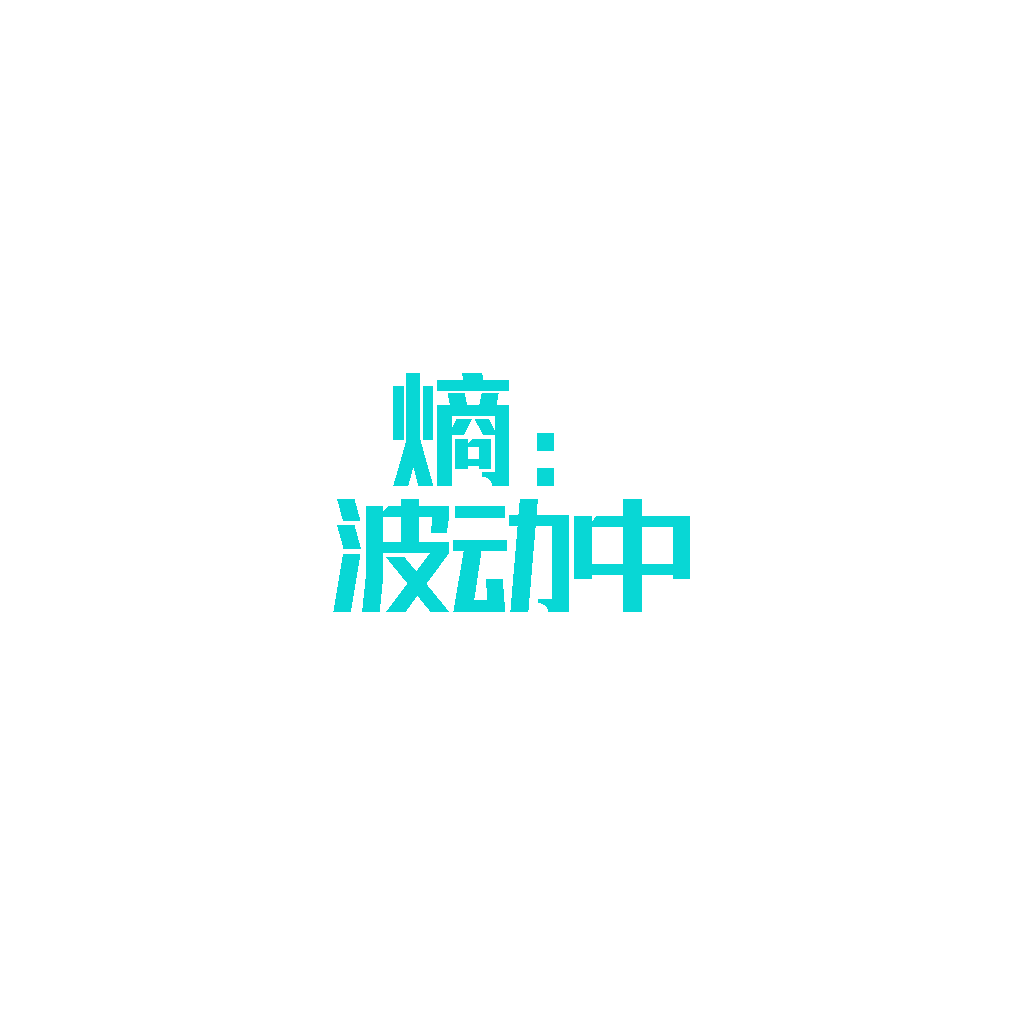
<style>
.page{position:relative;width:1024px;height:1024px;background:#ffffff}
.page>*{position:absolute;margin:0}
.t1{font:113px/126px "lianmengqiyilushuaizhengruiheiti-Regular";color:#08d7d5}
</style>
<div class="page">
<p class="t1" style="left:333px;top:373px;width:357px;height:239px;text-align:center">熵：<br>波动中</p>
</div>
